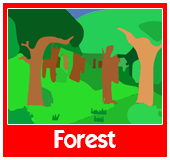
<style>
.page{position:relative;width:170px;height:160px;background:#ff0000}
.page>*{position:absolute;margin:0}
.t1{font:24px "ELEGANCE";color:#ffffff}
</style>
<div class="page">
<p class="t1" style="left:54px;top:130px;width:62px;height:18px">Forest</p>
</div>
